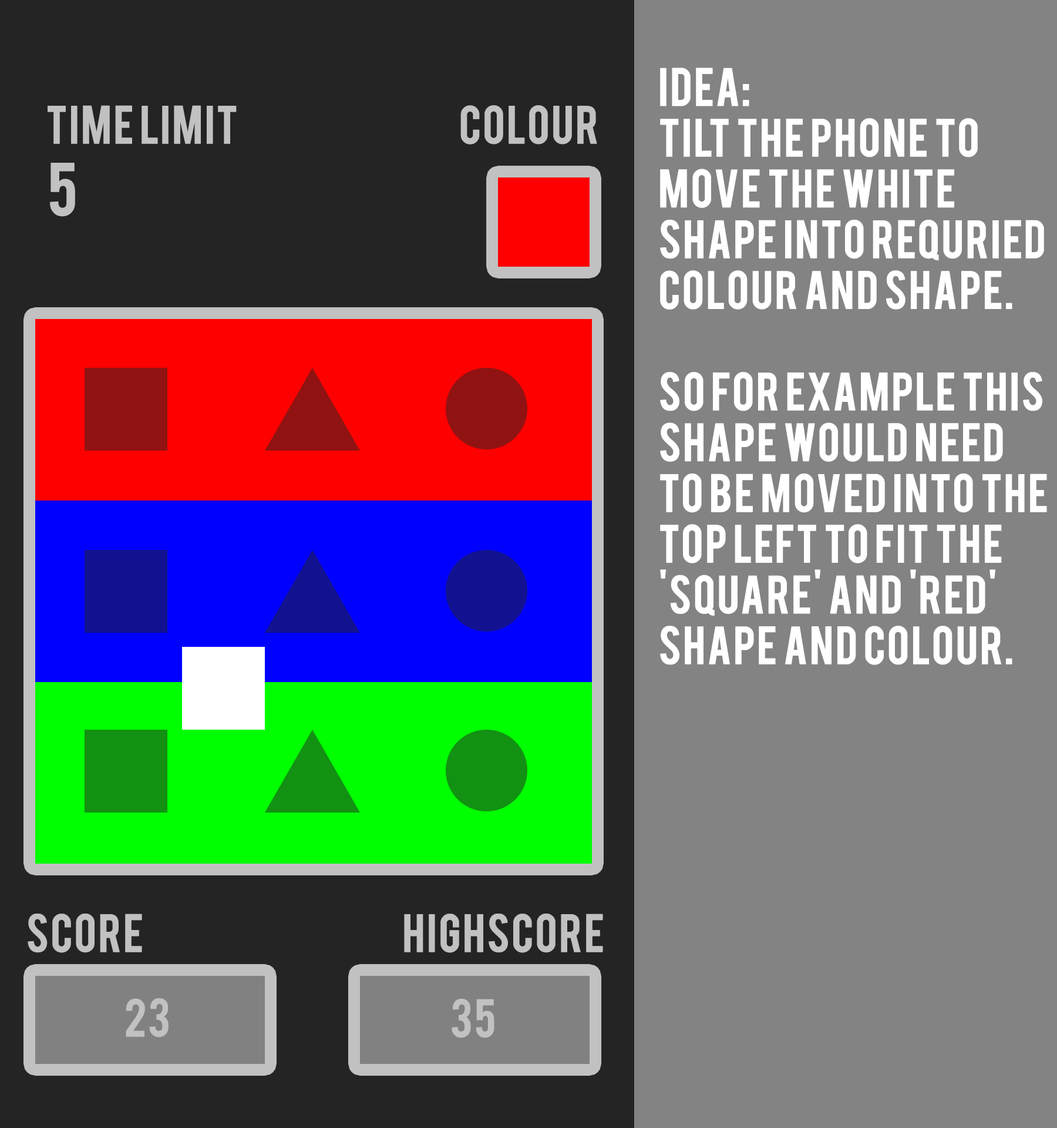
<style>
.page{position:relative;width:1057px;height:1128px;background:#838383}
.page>*{position:absolute;margin:0}
.t1{font:42.3px "Bebas";color:#ffffff;font-weight:bold}
.t2{font:42.3px "Bebas";color:#c1c1c1;font-weight:bold}
.t3{font:58.7px "Bebas";color:#c1c1c1;font-weight:bold}
</style>
<div class="page">
<p class="t1" style="left:660px;top:68px;width:387px;height:597px">Idea:<br>Tilt the phone to<br>move the white <br>shape into requried<br>colour and shape.<br><br>so for example this <br>shape would need <br>to be moved into the <br>top left to fit the <br>'square' and 'red'<br>shape and colour.</p>
<p class="t2" style="left:48px;top:105px;width:189px;height:39px">Time Limit</p>
<p class="t2" style="left:461px;top:105px;width:136px;height:39px">colour</p>
<p class="t3" style="left:50px;top:163px;width:25px;height:54px">5</p>
<p class="t2" style="left:28px;top:913px;width:114px;height:40px">sCORE</p>
<p class="t2" style="left:404px;top:913px;width:199px;height:40px">HighScore</p>
<p class="t2" style="left:126px;top:998px;width:43px;height:39px">23</p>
<p class="t2" style="left:452px;top:999px;width:43px;height:39px">35</p>
</div>
